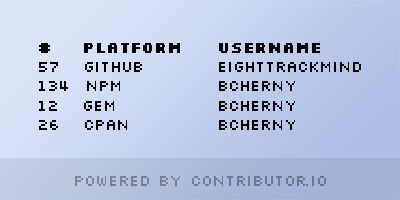
<style>
.page{position:relative;width:400px;height:200px}
.page>*{position:absolute;margin:0}
.t1{font:16px "Silkscreen";color:#000000}
.t2{font:16px "Silkscreen-Bold";color:#000000}
.t3{font:16px "Silkscreen";color:#737d93}
</style>
<div class="page">
<p class="t1" style="left:39px;top:43px;width:322px;height:87px"><span class="t2">#   PLATform  username<br></span>57   Github        eighttrackmind<br>134  NPM          bcherny<br>12   Gem       bcherny<br>26   CPAN          bcherny</p>
<p class="t3" style="left:75px;top:176px;width:251px;height:10px">Powered by contributor.io</p>
</div>
